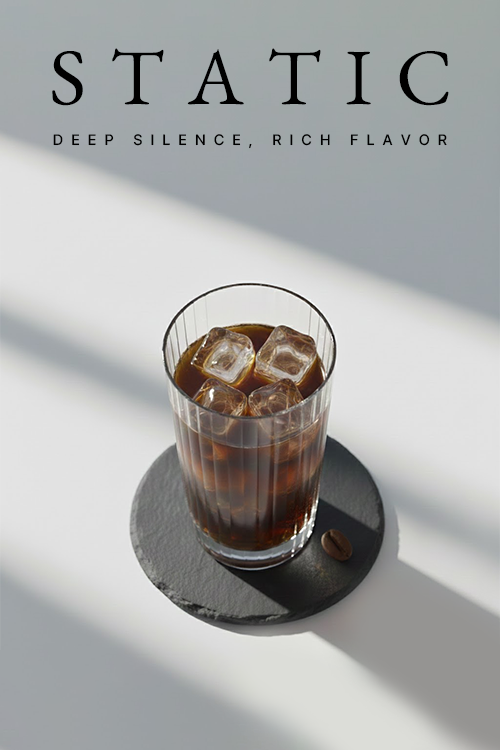
<style>
.page{position:relative;width:500px;height:750px}
.page>*{position:absolute;margin:0}
.t1{font:80px "EBGaramond-Regular";letter-spacing:0.3em;color:#000000}
.t2{font:15px "Pretendard-Medium";letter-spacing:0.52em;color:#000000;text-transform:uppercase}
</style>
<div class="page">
<p class="t1" style="left:52px;top:48px;width:397px;height:58px">STATIC</p>
<p class="t2" style="left:53px;top:134px;width:394px;height:15px">Deep Silence, Rich Flavor</p>
</div>
